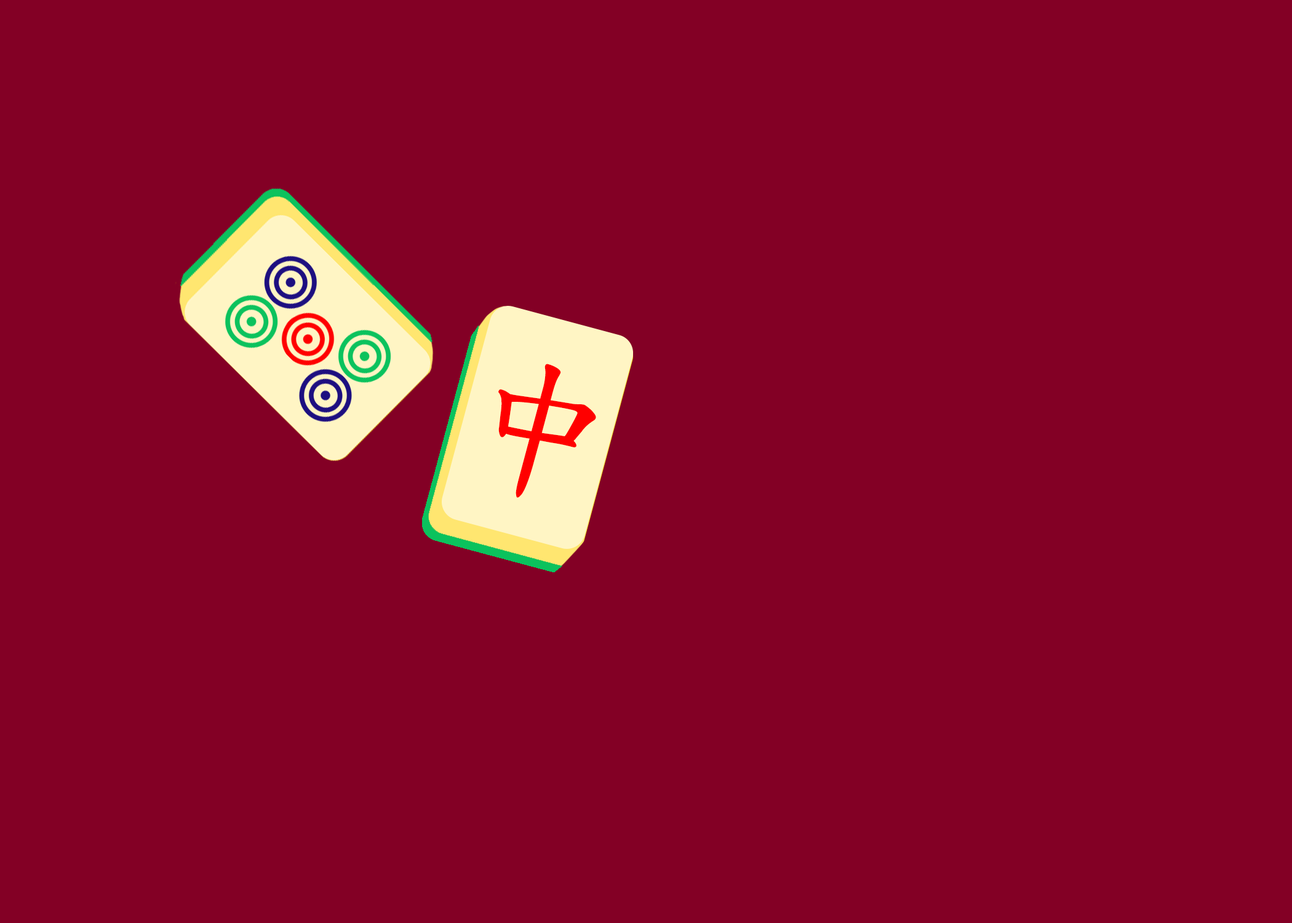
<style>
.page{position:relative;width:1292px;height:923px;background:#830025}
.page>*{position:absolute;margin:0}
.t1{font:156.2px "DFKaiShu-SB-Estd-BF";color:#ff0000;font-weight:bold}
</style>
<div class="page">
<p class="t1" style="left:498px;top:364px;width:98px;height:134px;rotate:15deg">中</p>
</div>
